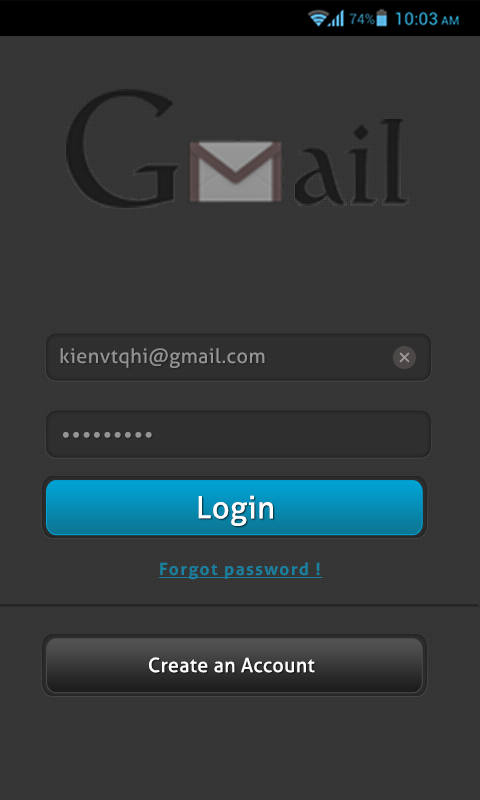
<style>
.page{position:relative;width:480px;height:800px;background:#373737}
.page>*{position:absolute;margin:0}
.t1{font:159.6px "Catull-Regular";letter-spacing:0.02em;color:#1d1d1d}
.t2{font:118.3px "Catull-Regular";letter-spacing:0.02em;color:#1d1d1d}
.t3{font:20px "Aller";letter-spacing:0.02em;color:#949494}
.t4{font:19.5px "Aller-Bold";letter-spacing:0.08em;color:#949494}
.t5{font:30.6px "Aller";letter-spacing:0.02em;color:#ffffff}
.t6{font:17px "Aller-Bold";letter-spacing:0.08em;color:#19819f;text-decoration:underline}
.t7{font:19.7px "Aller";letter-spacing:0.02em;color:#ffffff}
</style>
<div class="page">
<p class="t1" style="left:66px;top:89px;width:114px;height:119px">G</p>
<p class="t2" style="left:295px;top:119px;width:114px;height:87px">ail</p>
<p class="t3" style="left:60px;top:348px;width:205px;height:20px">kienvtqhi@gmail.com</p>
<p class="t4" style="left:63px;top:432px;width:89px;height:6px">•••••••••</p>
<p class="t5" style="left:198px;top:495px;width:75px;height:31px">Login</p>
<p class="t6" style="left:159px;top:562px;width:164px;height:18px">Forgot password !</p>
<p class="t7" style="left:149px;top:657px;width:166px;height:16px">Create an Account</p>
</div>
